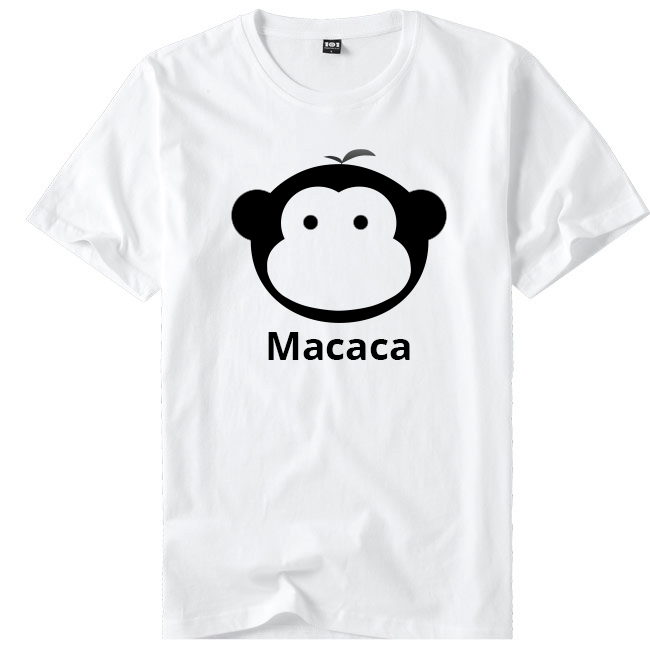
<style>
.page{position:relative;width:650px;height:650px;background:#ffffff}
.page>*{position:absolute;margin:0}
.t1{font:39px "OpenSans-Bold";color:#000000}
</style>
<div class="page">
<p class="t1" style="left:268px;top:332px;width:142px;height:28px">Macaca</p>
</div>
